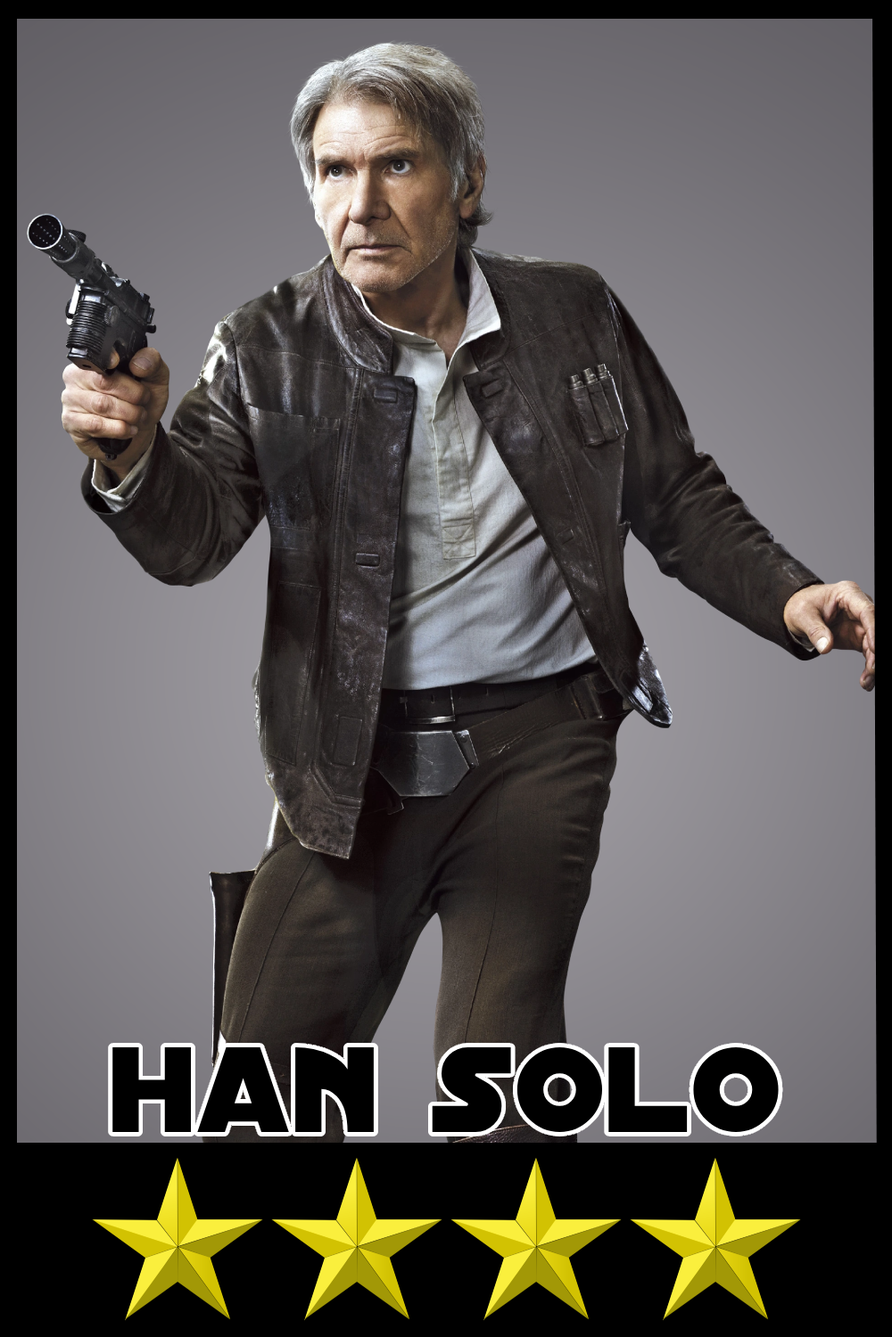
<style>
.page{position:relative;width:892px;height:1337px}
.page>*{position:absolute;margin:0}
.t1{font:130.5px "DistantGalaxy";color:#000000}
</style>
<div class="page">
<p class="t1" style="left:112px;top:1048px;width:666px;height:84px">han solo</p>
</div>
